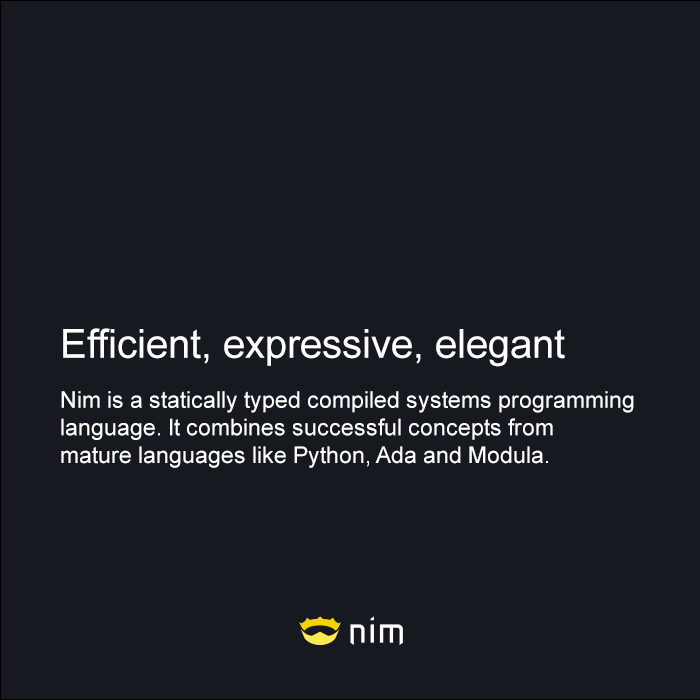
<style>
.page{position:relative;width:700px;height:700px;background:#171921}
.page>*{position:absolute;margin:0}
.t1{font:40px "ArialMT";color:#fefefe}
.t2{font:23px "ArialMT";color:#fefefe}
</style>
<div class="page">
<p class="t1" style="left:63px;top:328px;width:502px;height:39px">Efficient, expressive, elegant</p>
<p class="t2" style="left:61px;top:391px;width:573px;height:77px">Nim is a statically typed compiled systems programming<br>language. It combines successful concepts from<br>mature languages like Python, Ada and Modula.</p>
</div>
